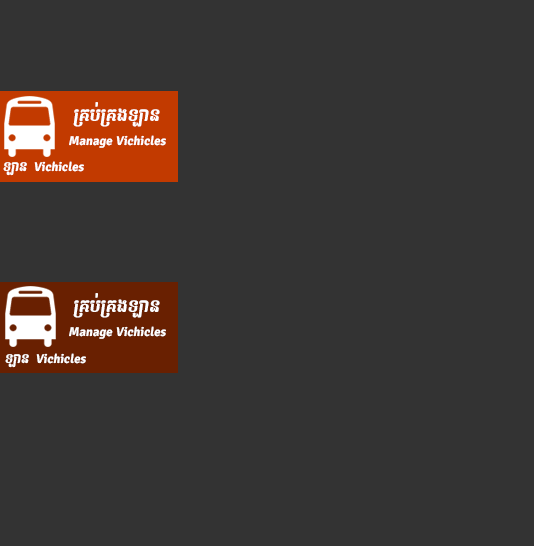
<style>
.page{position:relative;width:534px;height:546px;background:#333333}
.page>*{position:absolute;margin:0}
.t1{font:16px "Romnea-Italic";color:#ffffff}
.t2{font:12px "Romnea-Italic";color:#ffffff}
</style>
<div class="page">
<p class="t1" style="left:73px;top:102px;width:87px;height:25px">គ្រប់​គ្រង​ឡាន​</p>
<p class="t2" style="left:69px;top:135px;width:97px;height:13px">Manage Vichicles</p>
<p class="t2" style="left:3px;top:161px;width:81px;height:15px">ឡាន​  Vichicles</p>
<p class="t1" style="left:73px;top:293px;width:87px;height:25px">គ្រប់​គ្រង​ឡាន​</p>
<p class="t2" style="left:69px;top:326px;width:97px;height:13px">Manage Vichicles</p>
<p class="t2" style="left:5px;top:353px;width:81px;height:15px">ឡាន​  Vichicles</p>
</div>
